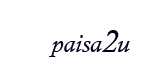
<style>
.page{position:relative;width:160px;height:76px;background:#ffffff}
.page>*{position:absolute;margin:0}
.t1{font:25px "CalistoMT-Italic";color:#01021a}
.t2{font:33.3px "CalistoMT-Italic";color:#01021a}
</style>
<div class="page">
<p class="t1" style="left:49px;top:30px;width:81px;height:27px">paisa<span class="t2">2</span>u</p>
</div>
